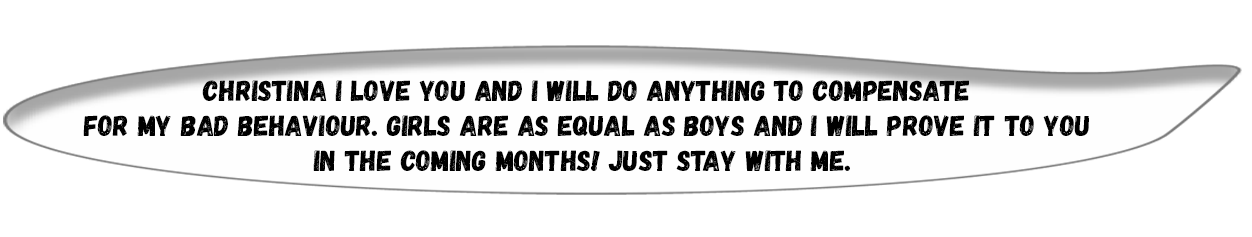
<style>
.page{position:relative;width:1252px;height:237px;background:#ffffff}
.page>*{position:absolute;margin:0}
.t1{font:29.3px "Gagalin-Regular";color:#000000}
</style>
<div class="page">
<p class="t1" style="left:83px;top:80px;width:1006px;height:91px;text-align:center">Christina I love you and I will do anything to compensate<br> for my bad behaviour. Girls are as equal as boys and I will prove it to you <br>in the coming months! Just stay with me.</p>
</div>
